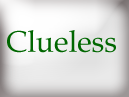
<style>
.page{position:relative;width:129px;height:97px}
.page>*{position:absolute;margin:0}
.t1{font:30px "PalatinoLinotype-Roman";color:#006600}
</style>
<div class="page">
<p class="t1" style="left:7px;top:30px;width:109px;height:23px">Clueless</p>
</div>
